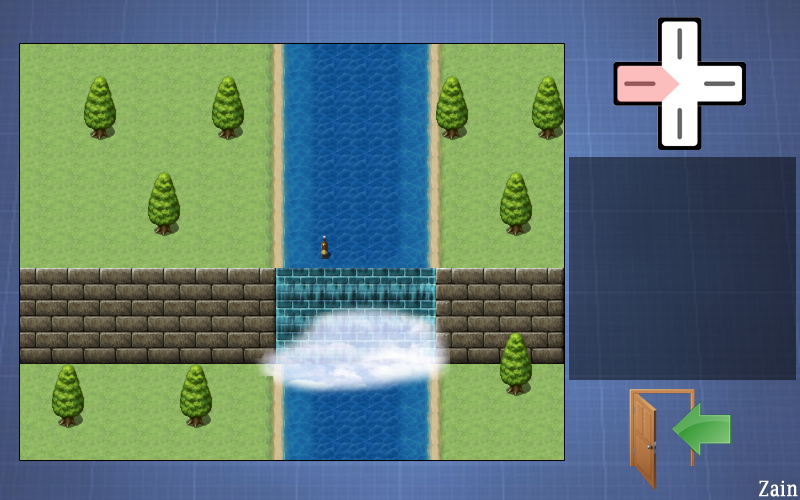
<style>
.page{position:relative;width:800px;height:500px}
.page>*{position:absolute;margin:0}
.t1{font:21px "LucidaFax";color:#ffffff;font-weight:bold;scale:0.83 1}
</style>
<div class="page">
<p class="t1" style="left:759px;top:480px;width:39px;height:17px">Zain</p>
</div>
